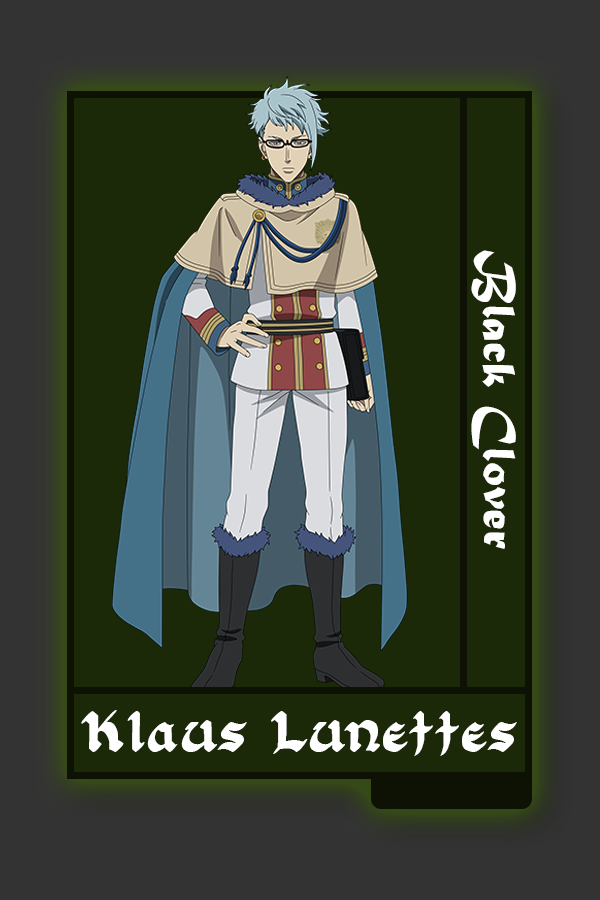
<style>
.page{position:relative;width:600px;height:900px;background:#1b2908}
.page>*{position:absolute;margin:0}
.t1{font:48.8px "MaturaMTScriptCapitals";color:#ffffff}
.t2{font:49.8px "FloranteatLaura";color:#ffffff}
</style>
<div class="page">
<p class="t1" style="left:471px;top:250px;width:45px;height:299px;rotate:90deg">Black Clover</p>
<p class="t2" style="left:81px;top:710px;width:436px;height:46px">Klaus Lunettes</p>
</div>
